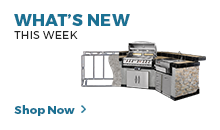
<style>
.page{position:relative;width:220px;height:130px;background:#ffffff}
.page>*{position:absolute;margin:0}
.t1{font:16.2px "Montserrat-ExtraBold";letter-spacing:0.025em;color:#1b7193}
.t2{font:11px "Montserrat-Light";letter-spacing:0.025em;color:#262626}
.t3{font:11.1px "Montserrat-ExtraBold";letter-spacing:0.025em;color:#1b7193}
</style>
<div class="page">
<p class="t1" style="left:14px;top:14px;width:116px;height:12px">WHAT’S NEW</p>
<p class="t2" style="left:14px;top:31px;width:64px;height:8px">THIS WEEK</p>
<p class="t3" style="left:14px;top:105px;width:61px;height:11px">Shop Now</p>
</div>
